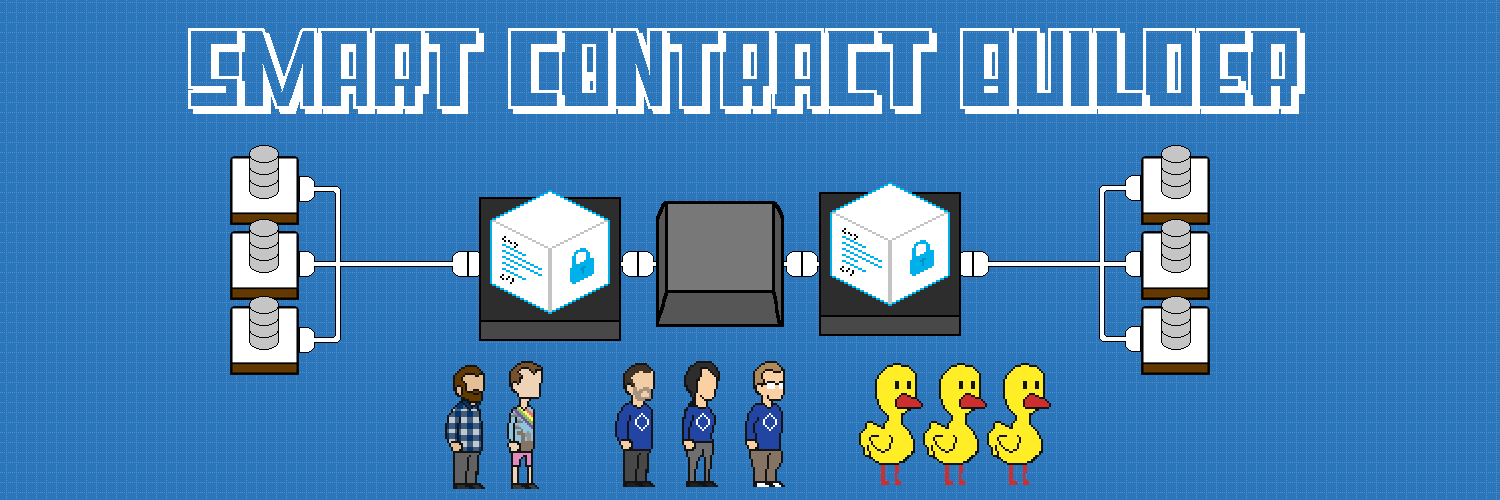
<style>
.page{position:relative;width:1500px;height:500px;background:#2b76bb}
.page>*{position:absolute;margin:0}
.t1{font:100px "Supercube";color:#ffffff}
</style>
<div class="page">
<p class="t1" style="left:188px;top:28px;width:1117px;height:86px">SMART CONTRACT BUILDER</p>
</div>
